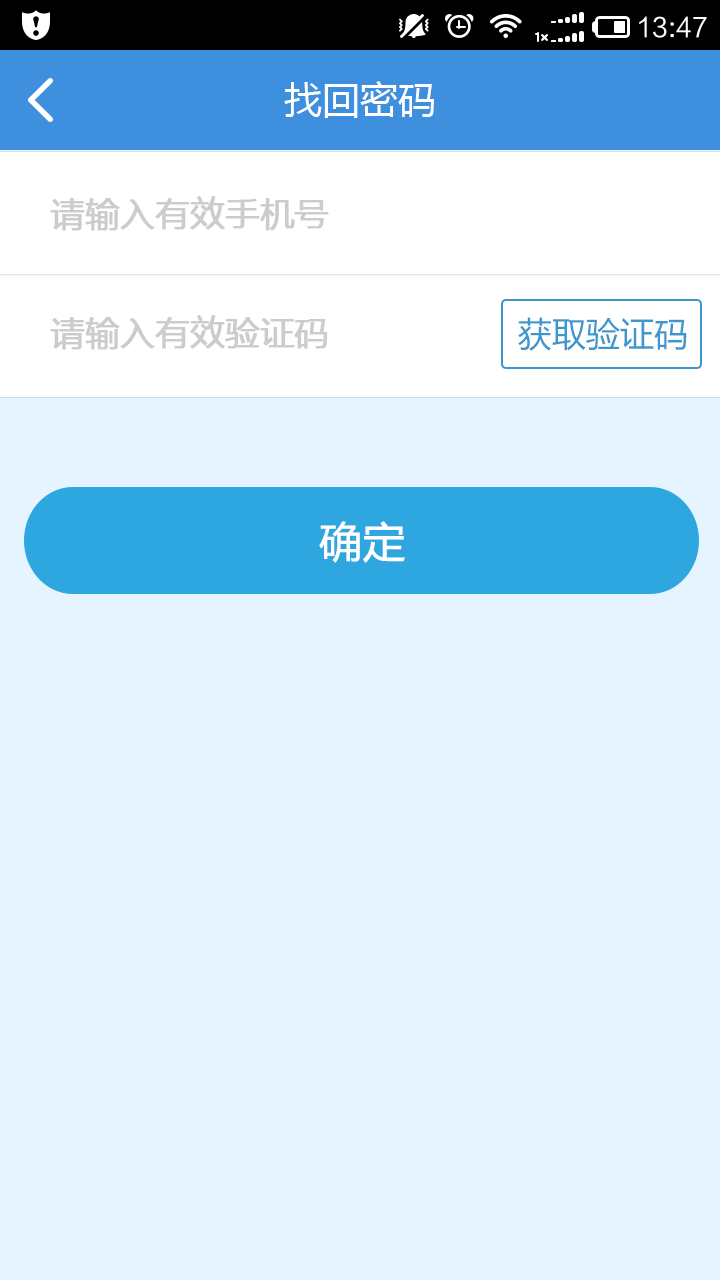
<style>
.page{position:relative;width:720px;height:1280px;background:#e6f4ff}
.page>*{position:absolute;margin:0}
.t1{font:38px "MicrosoftYaHei";color:#ffffff}
.t2{font:34px "MicrosoftYaHei";color:#cccccc;font-weight:bold}
.t3{font:34px "MicrosoftYaHei";color:#3c97ce}
.t4{font:42px "MicrosoftYaHei";color:#ffffff;font-weight:bold}
</style>
<div class="page">
<p class="t1" style="left:284px;top:81px;width:150px;height:37px">找回密码</p>
<p class="t2" style="left:50px;top:196px;width:279px;height:35px">请输入有效手机号</p>
<p class="t2" style="left:50px;top:315px;width:278px;height:35px">请输入有效验证码</p>
<p class="t3" style="left:518px;top:317px;width:169px;height:34px">获取验证码</p>
<p class="t4" style="left:319px;top:521px;width:86px;height:42px">确定</p>
</div>
